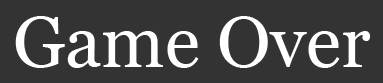
<style>
.page{position:relative;width:383px;height:83px;background:#333333}
.page>*{position:absolute;margin:0}
.t1{font:72px "Vani";color:#ffffff}
</style>
<div class="page">
<p class="t1" style="left:15px;top:16px;width:355px;height:52px">Game Over</p>
</div>
